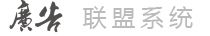
<style>
.page{position:relative;width:210px;height:36px;background:#ffffff}
.page>*{position:absolute;margin:0}
.t1{font:30px "Ò¶¸ùÓÑÐÐÊé·±";letter-spacing:-0.1em;color:#514e4e}
.t2{font:24px "MicrosoftYaHei";letter-spacing:0.2em;color:#bbbbbb}
</style>
<div class="page">
<p class="t1" style="left:9px;top:0px;width:54px;height:33px">广告</p>
<p class="t2" style="left:83px;top:6px;width:110px;height:23px">联盟系统</p>
</div>
